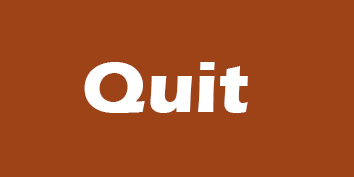
<style>
.page{position:relative;width:354px;height:177px;background:#9e4217}
.page>*{position:absolute;margin:0}
.t1{font:73.3px "ErasITC-Bold";color:#ffffff}
</style>
<div class="page">
<p class="t1" style="left:84px;top:62px;width:164px;height:51px">Quit</p>
</div>
